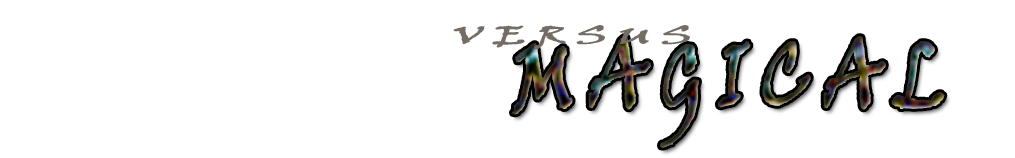
<style>
.page{position:relative;width:1015px;height:158px;background:#ffffff}
.page>*{position:absolute;margin:0}
.t1{font:24.9px "VinerHandITC";letter-spacing:0.2em;color:#746d66;font-weight:bold;scale:1.82 1}
.t2{font:90.6px "VinerHandITC";letter-spacing:0.2em;font-weight:bold;scale:0.76 1}
</style>
<div class="page">
<p class="t1" style="left:453px;top:25px;width:237px;height:24px">VERSUS</p>
<p class="t2" style="left:512px;top:36px;width:433px;height:112px">MAGICAL</p>
</div>
